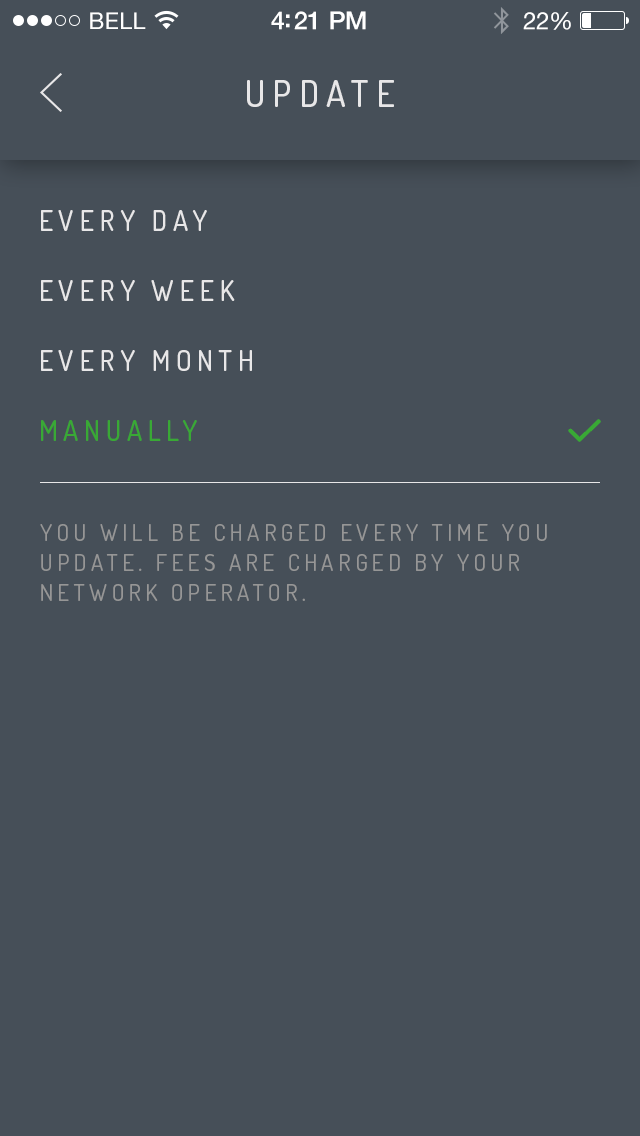
<style>
.page{position:relative;width:640px;height:1136px;background:#464f58}
.page>*{position:absolute;margin:0}
.t1{font:23px "HelveticaNeue";letter-spacing:0.02em;color:#ffffff}
.t2{font:25px "HelveticaNeue-Medium";letter-spacing:-0.02em;color:#ffffff}
.t3{font:24px "HelveticaNeue";letter-spacing:-0.02em;color:#ffffff}
.t4{font:36px "Dosis-Medium";letter-spacing:0.2em;color:#e8e7e8}
.t5{font:28px/70px "Dosis-Medium";letter-spacing:0.2em;color:#e8e7e8}
.t6{font:28px/70px "Dosis-Medium";letter-spacing:0.2em;color:#39a935}
.t7{font:22.9px/30.2px "Dosis-Regular";letter-spacing:0.2em;color:#969696}
</style>
<div class="page">
<p class="t1" style="left:90px;top:12px;width:56px;height:17px">BELL</p>
<p class="t2" style="left:271px;top:11px;width:95px;height:19px">4:21 PM</p>
<p class="t3" style="left:523px;top:12px;width:48px;height:18px">22%</p>
<p class="t4" style="left:247px;top:80px;width:147px;height:27px">UPDATE</p>
<p class="t5" style="left:41px;top:210px;width:211px;height:231px">EVERY DAY<br>EVERY WEEK<br>EVERY MONTH<br><span class="t6">MANUALLY</span></p>
<p class="t7" style="left:40px;top:524px;width:507px;height:77px">YOU WILL BE CHARGED EVERY TIME YOU UPDATE. FEES ARE CHARGED BY YOUR NETWORK OPERATOR.</p>
</div>
